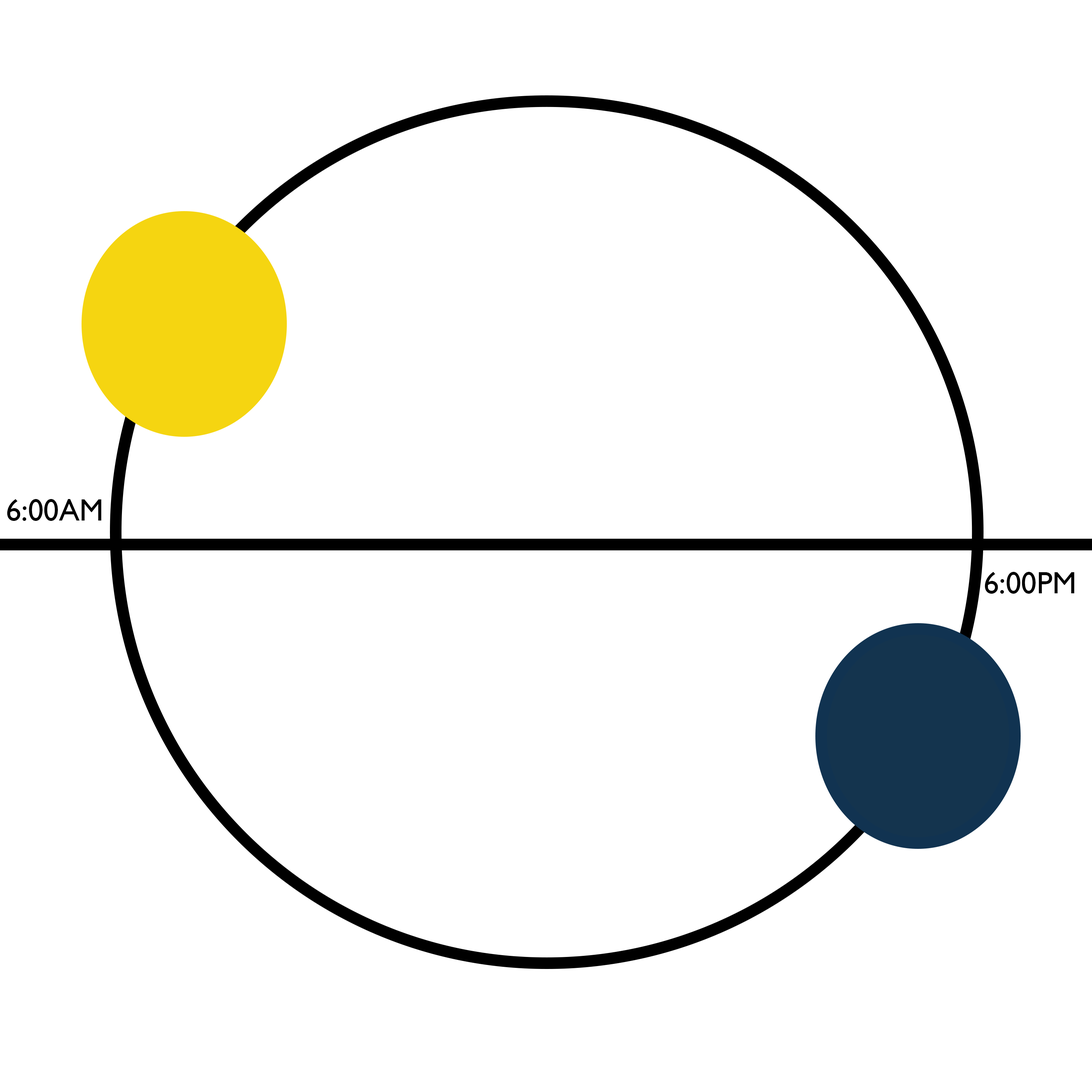
<style>
.page{position:relative;width:1092px;height:1092px;background:#ffffff}
.page>*{position:absolute;margin:0}
.t1{font:30.8px "GillSansMT";color:#000000}
</style>
<div class="page">
<p class="t1" style="left:7px;top:499px;width:95px;height:22px">6:00AM</p>
<p class="t1" style="left:985px;top:572px;width:90px;height:22px">6:00PM</p>
</div>
